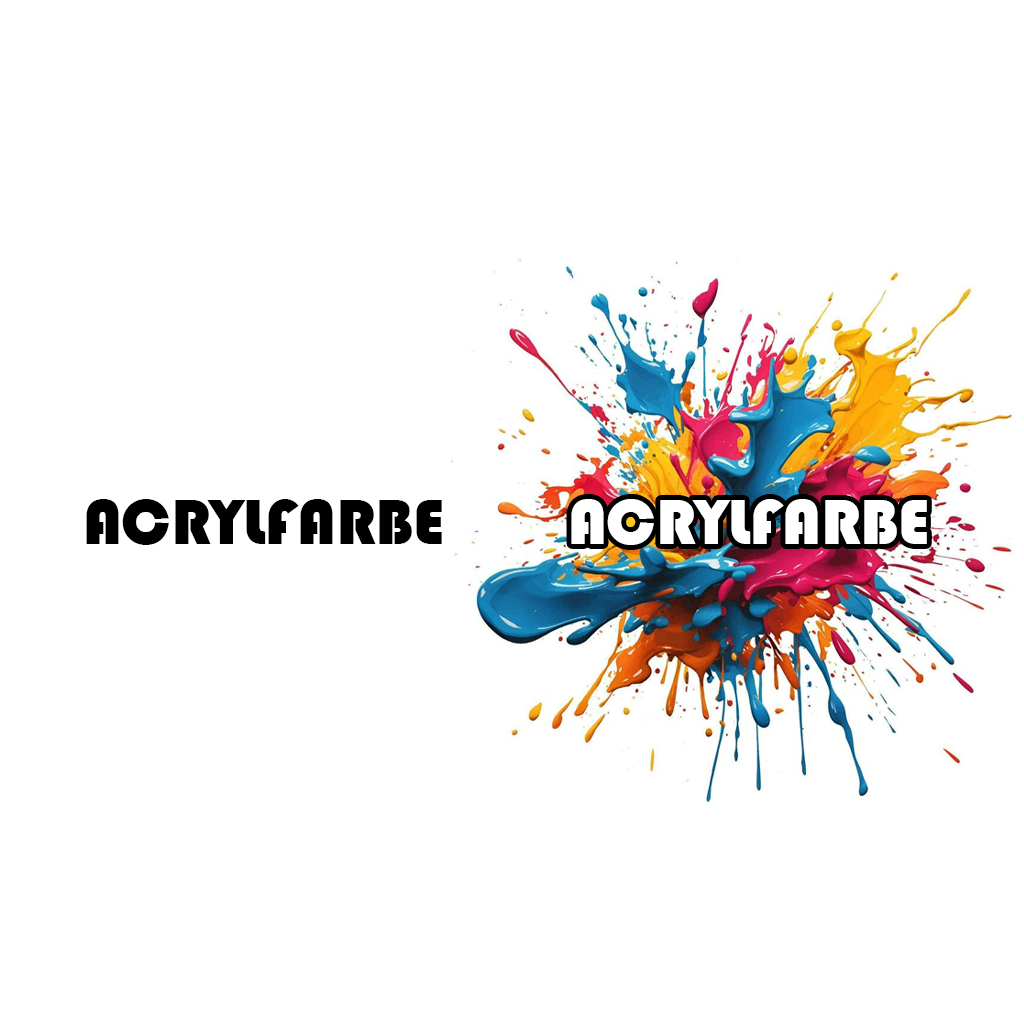
<style>
.page{position:relative;width:1024px;height:1024px;background:#ffffff}
.page>*{position:absolute;margin:0}
.t1{font:65.7px "Bauhaus93";color:#000000}
.t2{font:65.7px "Bauhaus93";color:#ffffff}
</style>
<div class="page">
<p class="t1" style="left:86px;top:499px;width:356px;height:46px">ACRYLFARBE</p>
<p class="t2" style="left:571px;top:499px;width:356px;height:46px">ACRYLFARBE</p>
</div>
